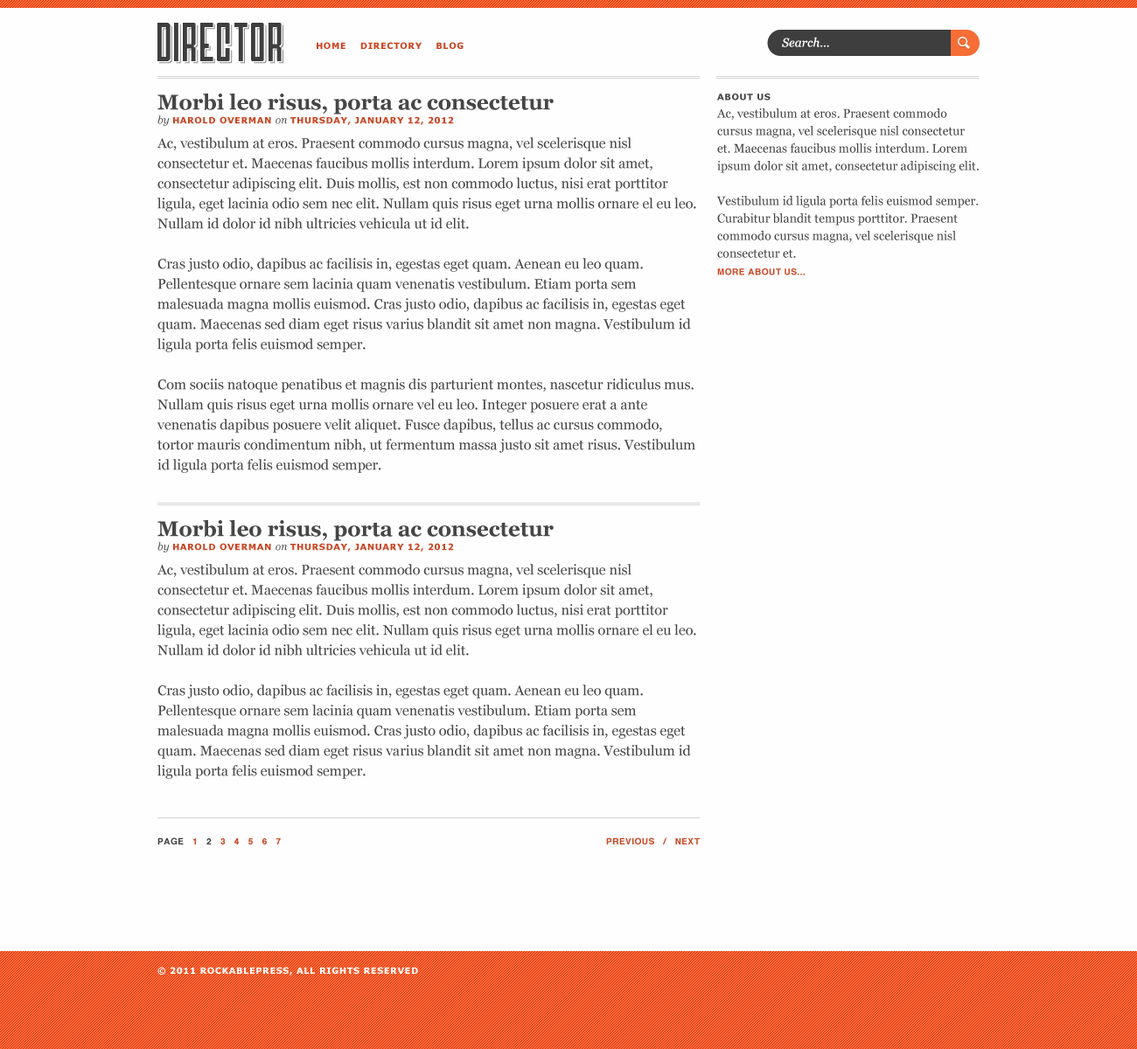
<style>
.page{position:relative;width:1137px;height:1049px;background:#fefefe}
.page>*{position:absolute;margin:0}
.t1{font:38.4px "Airship27";color:#3e3e3e}
.t2{font:38.4px "Airship27"}
.t3{font:8.7px "Verdana-Bold";letter-spacing:0.05em;color:#c94623}
.t4{font:12.2px "Georgia-Italic";color:#fefefe}
.t5{font:14px/20.1px "Georgia";color:#464646}
.t6{font:21px/16.6px "Georgia-Bold";color:#464646}
.t7{font:10.5px/14px "Georgia-Italic";color:#464646}
.t8{font:8.7px/14px "Verdana-Bold";letter-spacing:0.05em;color:#c94623}
.t9{font:14px/24.5px "Georgia";color:#464646}
.t10{font:12.2px/17.5px "Georgia";color:#464646}
.t11{font:8.7px/16.6px "Verdana-Bold";letter-spacing:0.05em;color:#464646}
.t12{font:8.7px/17.5px "Helvetica-Bold";letter-spacing:0.05em;color:#c94623}
.t13{font:8.7px "Helvetica-Bold";letter-spacing:0.05em;color:#c94623}
.t14{font:8.7px "Helvetica-Bold";letter-spacing:0.05em;color:#3e3e3e}
.t15{font:8.7px "Verdana-Bold";letter-spacing:0.05em;color:#ffffff}
</style>
<div class="page">
<p class="t1" style="left:157px;top:23px;width:125px;height:38px">DirectOr</p>
<p class="t2" style="left:158px;top:24px;width:124px;height:39px">DirectOr</p>
<p class="t3" style="left:316px;top:42px;width:147px;height:7px">HOME    DIRECTORY    BLOG</p>
<p class="t4" style="left:782px;top:37px;width:47px;height:10px">Search...</p>
<p class="t5" style="left:156px;top:94px;width:540px;height:379px"><span class="t6">Morbi leo risus, porta ac consectetur<br></span><span class="t7">by </span><span class="t8">HAROLD OVERMAN </span><span class="t7">on </span><span class="t8">THURSDAY, JANUARY 12, 2012<br></span><span class="t9">Ac, vestibulum at eros. Praesent commodo cursus magna, vel scelerisque nisl </span>consectetur et. Maecenas faucibus mollis interdum. Lorem ipsum dolor sit amet, consectetur adipiscing elit. Duis mollis, est non commodo luctus, nisi erat porttitor ligula, eget lacinia odio sem nec elit. Nullam quis risus eget urna mollis ornare el eu leo. Nullam id dolor id nibh ultricies vehicula ut id elit. <br><br>Cras justo odio, dapibus ac facilisis in, egestas eget quam. Aenean eu leo quam. Pellentesque ornare sem lacinia quam venenatis vestibulum. Etiam porta sem malesuada magna mollis euismod. Cras justo odio, dapibus ac facilisis in, egestas eget quam. Maecenas sed diam eget risus varius blandit sit amet non magna. Vestibulum id ligula porta felis euismod semper.<br><br>Com sociis natoque penatibus et magnis dis parturient montes, nascetur ridiculus mus. Nullam quis risus eget urna mollis ornare vel eu leo. Integer posuere erat a ante venenatis dapibus posuere velit aliquet. Fusce dapibus, tellus ac cursus commodo, tortor mauris condimentum nibh, ut fermentum massa justo sit amet risus. Vestibulum id ligula porta felis euismod semper.</p>
<p class="t10" style="left:716px;top:94px;width:262px;height:181px"><span class="t11">ABOUT US<br></span>Ac, vestibulum at eros. Praesent commodo cursus magna, vel scelerisque nisl consectetur et. Maecenas faucibus mollis interdum. Lorem ipsum dolor sit amet, consectetur adipiscing elit.<br><br>Vestibulum id ligula porta felis euismod semper. Curabitur blandit tempus porttitor. Praesent commodo cursus magna, vel scelerisque nisl consectetur et.<br><span class="t12">MORE ABOUT US...</span></p>
<p class="t5" style="left:156px;top:520px;width:540px;height:259px"><span class="t6">Morbi leo risus, porta ac consectetur<br></span><span class="t7">by </span><span class="t8">HAROLD OVERMAN </span><span class="t7">on </span><span class="t8">THURSDAY, JANUARY 12, 2012<br></span><span class="t9">Ac, vestibulum at eros. Praesent commodo cursus magna, vel scelerisque nisl </span>consectetur et. Maecenas faucibus mollis interdum. Lorem ipsum dolor sit amet, consectetur adipiscing elit. Duis mollis, est non commodo luctus, nisi erat porttitor ligula, eget lacinia odio sem nec elit. Nullam quis risus eget urna mollis ornare el eu leo. Nullam id dolor id nibh ultricies vehicula ut id elit. <br><br>Cras justo odio, dapibus ac facilisis in, egestas eget quam. Aenean eu leo quam. Pellentesque ornare sem lacinia quam venenatis vestibulum. Etiam porta sem malesuada magna mollis euismod. Cras justo odio, dapibus ac facilisis in, egestas eget quam. Maecenas sed diam eget risus varius blandit sit amet non magna. Vestibulum id ligula porta felis euismod semper.</p>
<p class="t13" style="left:157px;top:838px;width:124px;height:7px"><span class="t14">PAGE   </span>1   <span class="t14">2 </span>  3   4   5   6   7</p>
<p class="t13" style="left:606px;top:838px;width:93px;height:7px">PREVIOUS   /   NEXT</p>
<p class="t15" style="left:157px;top:967px;width:261px;height:9px">© 2011 ROCKABLEPRESS, ALL RIGHTS RESERVED</p>
</div>
